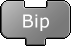
<style>
.page{position:relative;width:71px;height:46px}
.page>*{position:absolute;margin:0}
.t1{font:18px "Verdana";color:#ffffff}
</style>
<div class="page">
<p class="t1" style="left:23px;top:14px;width:26px;height:17px">Bip</p>
</div>
